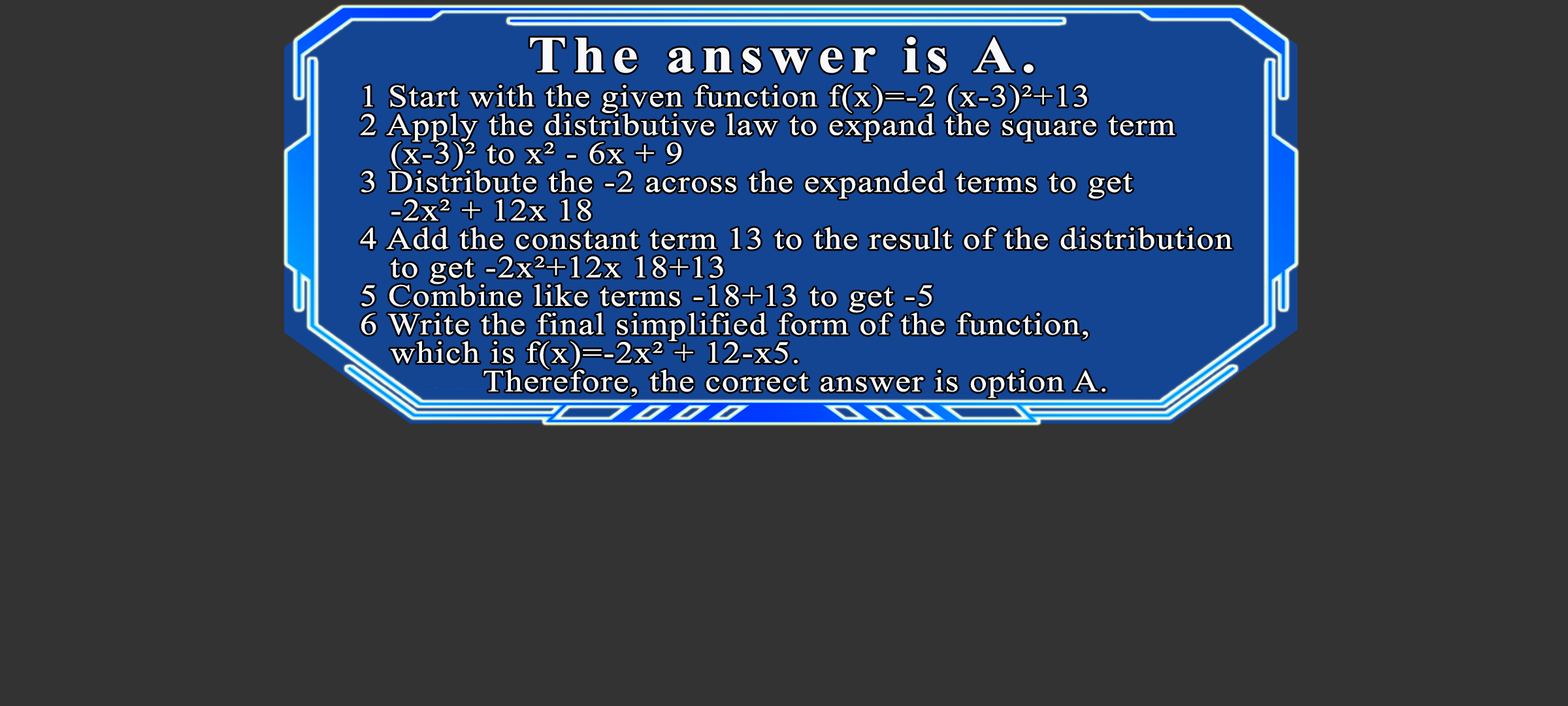
<style>
.page{position:relative;width:1568px;height:706px;background:#333333}
.page>*{position:absolute;margin:0}
.t1{font:51.7px "TimesNewRomanPS-BoldMT";letter-spacing:0.115em;color:#f7f9fb;scale:1.12 1}
.t2{font:30.9px/28.5px "TimesNewRomanPSMT";letter-spacing:0.035em;color:#f7f9fb;scale:1.12 1}
</style>
<div class="page">
<p class="t1" style="left:530px;top:37px;width:504px;height:36px">The answer is A.</p>
<p class="t2" style="left:360px;top:84px;width:872px;height:314px">1 Start with the given function f(x)=-2 (x-3)²+13<br>2 Apply the distributive law to expand the square term<br>  (x-3)² to x² - 6x + 9<br>3 Distribute the -2 across the expanded terms to get<br>  -2x² + 12x 18<br>4 Add the constant term 13 to the result of the distribution<br>  to get -2x²+12x 18+13<br>5 Combine like terms -18+13 to get -5<br>6 Write the final simplified form of the function,<br>  which is f(x)=-2x² + 12-x5. <br>       Therefore, the correct answer is option A.</p>
</div>
